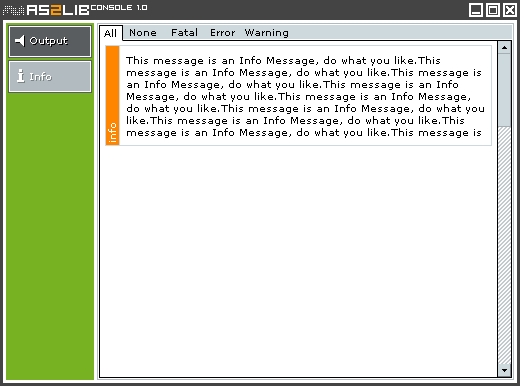
<style>
.page{position:relative;width:520px;height:386px;background:#ffffff}
.page>*{position:absolute;margin:0}
.t1{font:8px "FFFCompact";color:#ffffff}
.t2{font:10px "Verdana";color:#000000}
.t3{font:10px "Verdana";color:#ffffff}
.t4{font:10px "Verdana";color:#7c8385}
</style>
<div class="page">
<p class="t1" style="left:91px;top:5px;width:56px;height:5px">Console 1.0</p>
<p class="t2" style="left:104px;top:29px;width:12px;height:8px">All</p>
<p class="t2" style="left:130px;top:29px;width:26px;height:7px">None</p>
<p class="t2" style="left:172px;top:28px;width:25px;height:8px">Fatal</p>
<p class="t2" style="left:211px;top:29px;width:24px;height:7px">Error</p>
<p class="t2" style="left:245px;top:29px;width:43px;height:9px">Warning</p>
<p class="t3" style="left:30px;top:37px;width:37px;height:9px">Output</p>
<p class="t2" style="left:31px;top:38px;width:37px;height:9px">Output</p>
<p class="t2" style="left:126px;top:56px;width:358px;height:82px">This message is an Info Message, do what you like.This message is an Info Message, do what you like.This message is an Info Message, do what you like.This message is an Info Message, do what you like.This message is an Info Message, do what you like.This message is an Info Message, do what you like.This message is an Info Message, do what you like.This message is an Info Message, do what you like.This message is an Info Message, do what you like.This message is an Info Message, do what you like.This message is an Info Message, do what you like.This message is an Info Message, do what you like.</p>
<p class="t3" style="left:30px;top:72px;width:21px;height:8px">Info</p>
<p class="t4" style="left:31px;top:73px;width:21px;height:8px">Info</p>
<p class="t3" style="left:108px;top:123px;width:8px;height:19px;rotate:-90deg">info</p>
</div>
